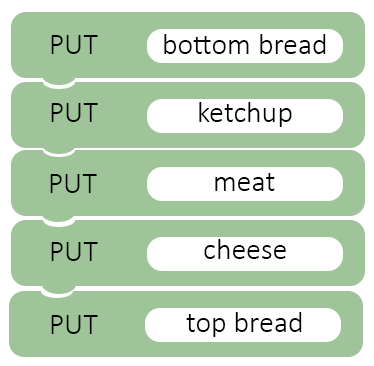
<style>
.page{position:relative;width:374px;height:366px;background:#a0c49a}
.page>*{position:absolute;margin:0}
.t1{font:30px "Calibri-Light";color:#000000}
</style>
<div class="page">
<p class="t1" style="left:51px;top:35px;width:47px;height:19px">PUT</p>
<p class="t1" style="left:164px;top:34px;width:162px;height:20px">bottom bread</p>
<p class="t1" style="left:199px;top:102px;width:93px;height:25px">ketchup</p>
<p class="t1" style="left:51px;top:103px;width:47px;height:19px">PUT</p>
<p class="t1" style="left:50px;top:174px;width:47px;height:19px">PUT</p>
<p class="t1" style="left:215px;top:173px;width:60px;height:18px">meat</p>
<p class="t1" style="left:51px;top:242px;width:47px;height:19px">PUT</p>
<p class="t1" style="left:204px;top:239px;width:82px;height:20px">cheese</p>
<p class="t1" style="left:51px;top:315px;width:47px;height:19px">PUT</p>
<p class="t1" style="left:186px;top:312px;width:116px;height:25px">top bread</p>
</div>
